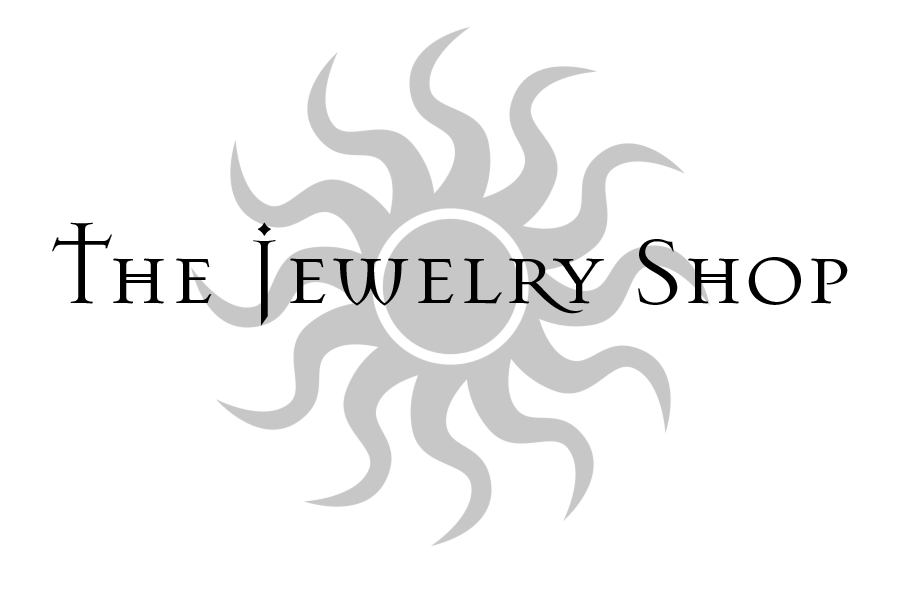
<style>
.page{position:relative;width:900px;height:600px;background:#ffffff}
.page>*{position:absolute;margin:0}
.t1{font:100px "MasonSerifOT-Regular";color:#010001}
</style>
<div class="page">
<p class="t1" style="left:52px;top:222px;width:796px;height:104px">the Jewelry Shop</p>
</div>
